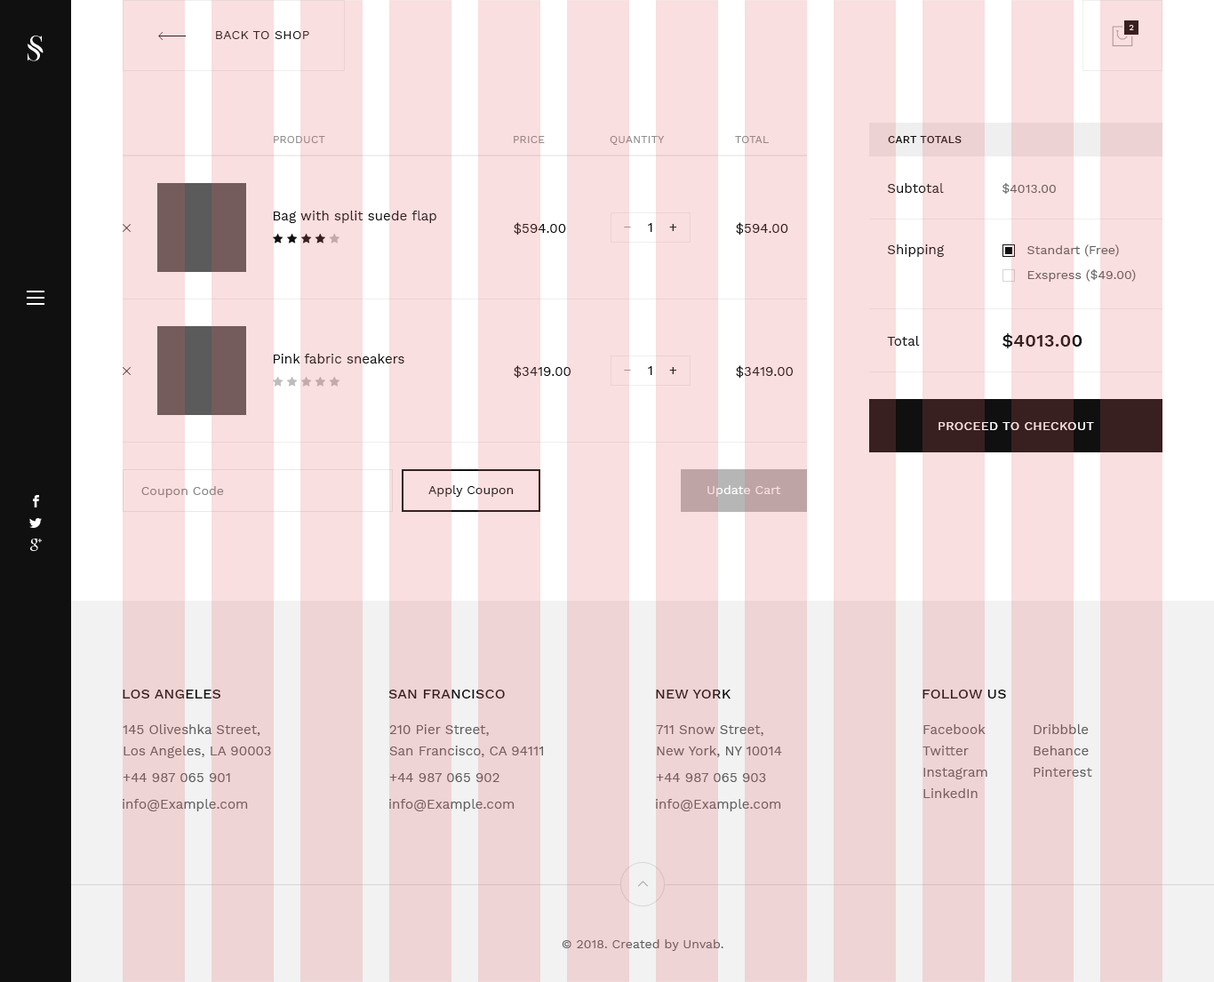
<style>
.page{position:relative;width:1214px;height:982px;background:#f9dfdf}
.page>*{position:absolute;margin:0}
.t1{font:8px "WorkSans-Regular";letter-spacing:0.025em;color:#f9dfdf;text-transform:uppercase}
.t2{font:12.4px "WorkSans-Regular";letter-spacing:0.025em;text-transform:uppercase}
.t3{font:10.7px "WorkSans-Regular";letter-spacing:0.025em;color:#8e8e8e;text-transform:uppercase}
.t4{font:10.7px "WorkSans-Medium";letter-spacing:0.025em;text-transform:uppercase}
.t5{font:13.3px "WorkSans-Regular";letter-spacing:0.005em}
.t6{font:12.4px "WorkSans-Regular";letter-spacing:0.005em;color:#795f5f}
.t7{font:13.3px "WorkSans-Regular";letter-spacing:0.005em;color:#9c9c9c}
.t8{font:13.3px "WorkSans-Regular";letter-spacing:0.005em;color:#101010}
.t9{font:13.3px "WorkSans-Regular";letter-spacing:0.005em;color:#392020}
.t10{font:17.8px "WorkSans-SemiBold";letter-spacing:0.01em;color:#392020}
.t11{font:12.4px "WorkSans-Medium";letter-spacing:0.025em;color:#f9dfdf;text-transform:uppercase}
.t12{font:12.4px "WorkSans-Regular";letter-spacing:0.005em;color:#392020}
.t13{font:12.4px "WorkSans-Regular";letter-spacing:0.005em}
.t14{font:12.4px "WorkSans-Regular";letter-spacing:0.005em;color:#858585}
.t15{font:14.2px "WorkSans-Medium";letter-spacing:0.01em;text-transform:uppercase}
.t16{font:14.2px "WorkSans-Medium";letter-spacing:0.01em;color:#381e1e;text-transform:uppercase}
.t17{font:13.3px/21.3px "WorkSans-Regular";letter-spacing:0.005em;color:#795f5f}
.t18{font:13.3px "WorkSans-Regular";letter-spacing:0.005em;color:#795f5f}
</style>
<div class="page">
<p class="t1" style="left:1129px;top:25px;width:5px;height:5px">2</p>
<p class="t2" style="left:216px;top:31px;width:93px;height:8px">back to shop</p>
<p class="t3" style="left:274px;top:136px;width:51px;height:7px">product</p>
<p class="t3" style="left:514px;top:136px;width:31px;height:7px">price</p>
<p class="t3" style="left:610px;top:136px;width:55px;height:9px">quantity</p>
<p class="t3" style="left:735px;top:136px;width:34px;height:7px">total</p>
<p class="t4" style="left:888px;top:136px;width:74px;height:7px">cart totals</p>
<p class="t5" style="left:887px;top:183px;width:57px;height:10px">Subtotal</p>
<p class="t6" style="left:1003px;top:183px;width:53px;height:11px">$4013.00</p>
<p class="t5" style="left:274px;top:211px;width:162px;height:12px">Bag with split suede flap</p>
<p class="t5" style="left:514px;top:222px;width:52px;height:13px">$594.00</p>
<p class="t7" style="left:624px;top:227px;width:7px;height:1px">−</p>
<p class="t8" style="left:648px;top:223px;width:4px;height:9px">1</p>
<p class="t9" style="left:669px;top:224px;width:7px;height:7px">+</p>
<p class="t9" style="left:736px;top:222px;width:52px;height:13px">$594.00</p>
<p class="t5" style="left:887px;top:244px;width:58px;height:13px">Shipping</p>
<p class="t6" style="left:1027px;top:244px;width:92px;height:13px">Standart (Free)</p>
<p class="t6" style="left:1027px;top:269px;width:109px;height:13px">Exspress ($49.00)</p>
<p class="t8" style="left:887px;top:336px;width:33px;height:10px">Total</p>
<p class="t10" style="left:1003px;top:333px;width:80px;height:15px">$4013.00</p>
<p class="t5" style="left:274px;top:354px;width:130px;height:10px">Pink fabric sneakers</p>
<p class="t5" style="left:514px;top:365px;width:57px;height:13px">$3419.00</p>
<p class="t9" style="left:736px;top:365px;width:57px;height:13px">$3419.00</p>
<p class="t7" style="left:624px;top:370px;width:7px;height:1px">−</p>
<p class="t8" style="left:648px;top:366px;width:4px;height:9px">1</p>
<p class="t9" style="left:669px;top:367px;width:7px;height:7px">+</p>
<p class="t11" style="left:939px;top:422px;width:155px;height:8px">proceed to checkout</p>
<p class="t12" style="left:428px;top:485px;width:86px;height:12px">Apply Coupon</p>
<p class="t13" style="left:707px;top:485px;width:74px;height:12px">Update Cart</p>
<p class="t14" style="left:141px;top:486px;width:83px;height:12px">Coupon Code</p>
<p class="t15" style="left:123px;top:690px;width:97px;height:9px">los angeles</p>
<p class="t16" style="left:388px;top:690px;width:117px;height:9px">San Francisco</p>
<p class="t16" style="left:656px;top:690px;width:75px;height:9px">New York</p>
<p class="t16" style="left:923px;top:690px;width:83px;height:9px">follow us</p>
<p class="t17" style="left:123px;top:724px;width:148px;height:34px">145 Oliveshka Street, <br>Los Angeles, LA 90003</p>
<p class="t17" style="left:389px;top:724px;width:154px;height:33px">210 Pier Street,<br>San Francisco, CA 94111</p>
<p class="t17" style="left:656px;top:725px;width:126px;height:32px">711 Snow Street, <br>New York, NY 10014</p>
<p class="t17" style="left:923px;top:724px;width:64px;height:74px">Facebook<br>Twitter<br>Instagram<br>LinkedIn</p>
<p class="t17" style="left:1034px;top:724px;width:58px;height:53px">Dribbble<br>Behance<br>Pinterest</p>
<p class="t18" style="left:123px;top:773px;width:107px;height:9px">+44 987 065 901</p>
<p class="t18" style="left:389px;top:773px;width:111px;height:9px">+44 987 065 902</p>
<p class="t18" style="left:656px;top:773px;width:110px;height:9px">+44 987 065 903</p>
<p class="t18" style="left:123px;top:799px;width:125px;height:12px">info@Example.com</p>
<p class="t18" style="left:389px;top:799px;width:126px;height:12px">info@Example.com</p>
<p class="t18" style="left:656px;top:799px;width:125px;height:12px">info@Example.com</p>
<p class="t6" style="left:562px;top:939px;width:161px;height:12px">© 2018. Created by Unvab.</p>
</div>
